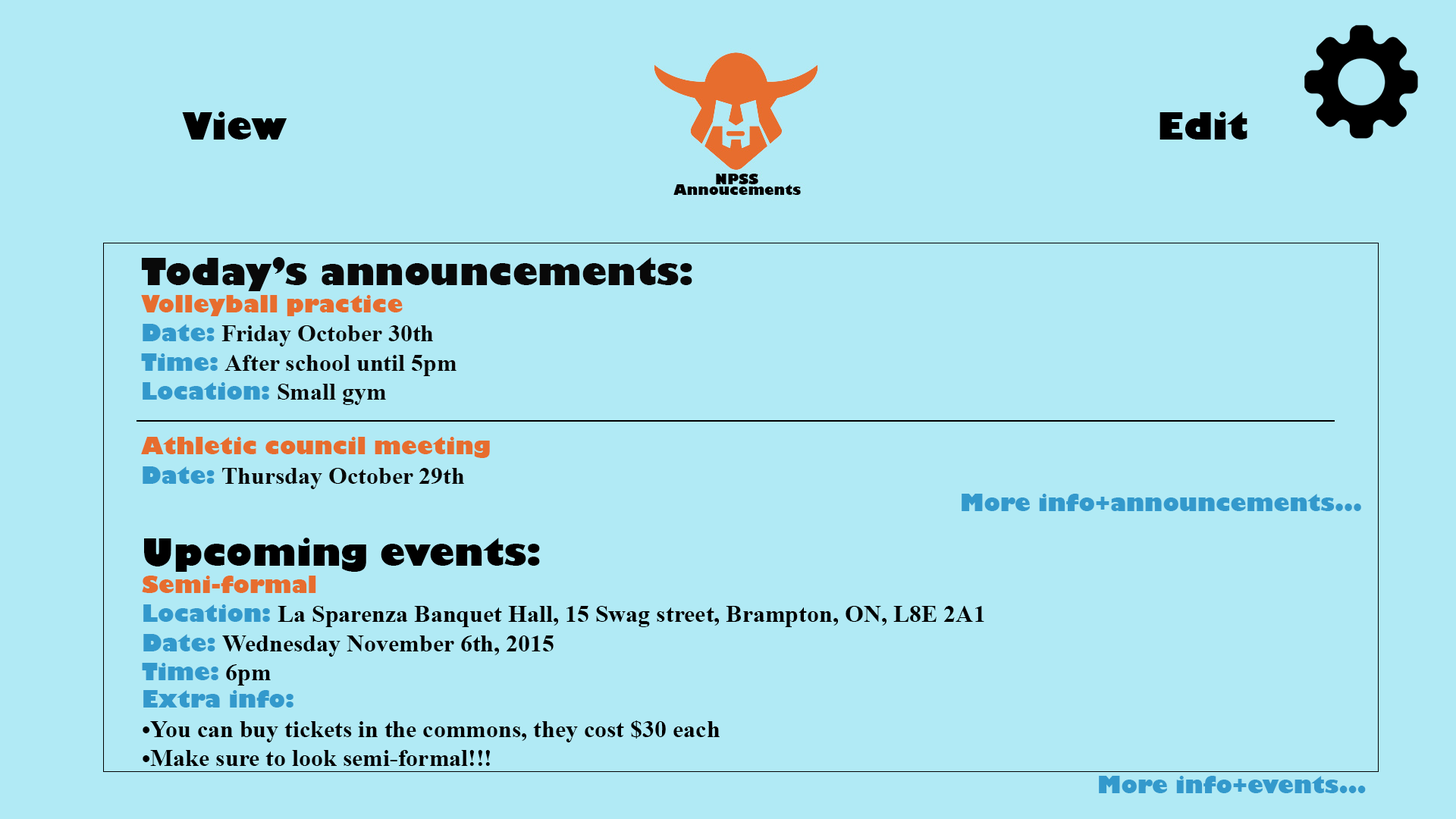
<style>
.page{position:relative;width:1456px;height:819px;background:#b1eaf5}
.page>*{position:absolute;margin:0}
.t1{font:36.4px "GillSans-UltraBold";color:#000000}
.t2{font:22.7px "GillSans-UltraBold";color:#3399cc}
.t3{font:36.4px "GillSans-UltraBold";color:#090909}
.t4{font:22.7px "GillSans-UltraBold";color:#e76d2e}
.t5{font:24.3px "TimesNewRomanPS-BoldMT";color:#090909}
.t6{font:24.3px "TimesNewRomanPS-BoldMT";color:#000000}
</style>
<div class="page">
<p class="t1" style="left:182px;top:111px;width:105px;height:29px">View</p>
<p class="t1" style="left:1159px;top:111px;width:88px;height:29px">Edit</p>
<p class="t2" style="left:141px;top:257px;width:1220px;height:254px"><span class="t3">Today’s announcements:<br></span><span class="t4">Volleyball practice <br></span>Date: <span class="t5">Friday October 30th<br></span>Time: <span class="t5">After school until 5pm<br></span>Location: <span class="t5">Small gym<br><br></span><span class="t4">Athletic council meeting<br></span>Date: <span class="t5">Thursday October 29th<br></span>                              More info+announcements...</p>
<p class="t6" style="left:142px;top:538px;width:1224px;height:255px"><span class="t1">Upcoming events:<br></span><span class="t4">Semi-formal<br></span><span class="t2">Location: </span>La Sparenza Banquet Hall, 15 Swag street, Brampton, ON, L8E 2A1<br><span class="t2">Date: </span>Wednesday November 6th, 2015<br><span class="t2">Time: </span>6pm<br><span class="t2">Extra info:<br></span>•You can buy tickets in the commons, they cost $30 each<br>•Make sure to look semi-formal!!!<br><span class="t2">                                   More info+events...</span></p>
</div>
